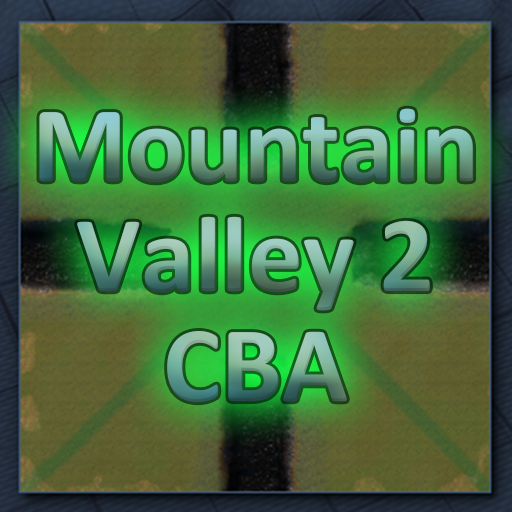
<style>
.page{position:relative;width:512px;height:512px}
.page>*{position:absolute;margin:0}
.t1{font:108.7px/110px "Calibri-Bold"}
</style>
<div class="page">
<p class="t1" style="left:39px;top:108px;width:435px;height:295px;text-align:center">Mountain<br>Valley 2<br>CBA</p>
</div>
